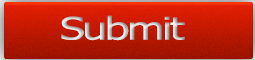
<style>
.page{position:relative;width:255px;height:60px}
.page>*{position:absolute;margin:0}
.t1{font:31.1px "Tahoma";letter-spacing:-0.05em;scale:1.42 1}
</style>
<div class="page">
<p class="t1" style="left:61px;top:15px;width:124px;height:26px">Submit</p>
</div>
